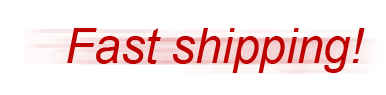
<style>
.page{position:relative;width:386px;height:95px;background:#ffffff}
.page>*{position:absolute;margin:0}
.t1{font:48px "Arial-ItalicMT";color:#be0101}
</style>
<div class="page">
<p class="t1" style="left:67px;top:28px;width:298px;height:45px">Fast shipping!</p>
</div>
